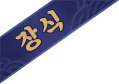
<style>
.page{position:relative;width:119px;height:84px;background:#ffffff}
.page>*{position:absolute;margin:0}
.t1{font:25.7px "SDKukdetopokki-bBd";letter-spacing:0.12em;color:#d8b163}
</style>
<div class="page">
<p class="t1" style="left:15px;top:10px;width:48px;height:41px;rotate:-35deg">장식</p>
</div>
